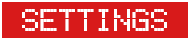
<style>
.page{position:relative;width:190px;height:40px;background:#d81a1a}
.page>*{position:absolute;margin:0}
.t1{font:30px "ElectronicHighwaySign";color:#ffffff}
</style>
<div class="page">
<p class="t1" style="left:22px;top:9px;width:145px;height:22px">Settings</p>
</div>
